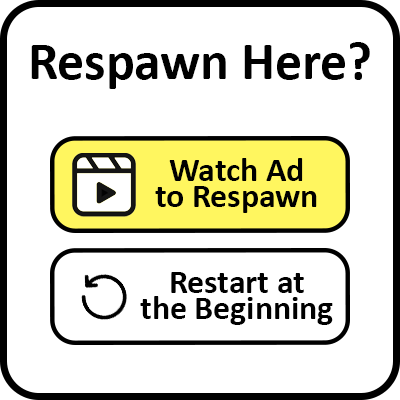
<style>
.page{position:relative;width:400px;height:400px;background:#ffffff}
.page>*{position:absolute;margin:0}
.t1{font:53.6px "Calibri-Bold";color:#000000}
.t2{font:33.8px/25.8px "Calibri-Bold";color:#000000}
</style>
<div class="page">
<p class="t1" style="left:31px;top:42px;width:339px;height:47px">Respawn Here?</p>
<p class="t2" style="left:155px;top:158px;width:162px;height:55px;text-align:center">Watch Ad<br>to Respawn</p>
<p class="t2" style="left:140px;top:272px;width:193px;height:53px;text-align:center">Restart at<br>the Beginning</p>
</div>
